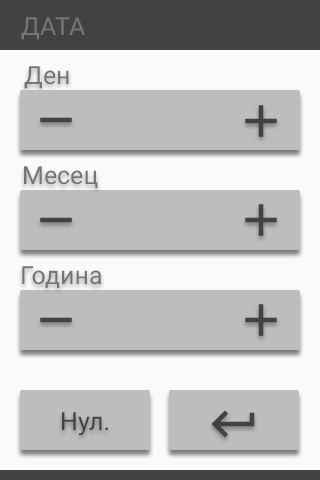
<style>
.page{position:relative;width:320px;height:480px;background:#bdbdbd}
.page>*{position:absolute;margin:0}
.t1{font:25px "Roboto-Regular";color:#757575}
.t2{font:25px "Roboto-Regular";color:#424242}
</style>
<div class="page">
<p class="t1" style="left:21px;top:17px;width:64px;height:23px">ДАТА</p>
<p class="t1" style="left:24px;top:66px;width:45px;height:23px">Ден</p>
<p class="t1" style="left:24px;top:166px;width:74px;height:22px">Месец</p>
<p class="t1" style="left:22px;top:266px;width:80px;height:22px">Година</p>
<p class="t2" style="left:62px;top:412px;width:46px;height:24px">Нул.</p>
</div>
